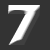
<style>
.page{position:relative;width:50px;height:50px;background:#333333}
.page>*{position:absolute;margin:0}
.t1{font:60px "ErasITC-Bold"}
</style>
<div class="page">
<p class="t1" style="left:8px;top:5px;width:32px;height:40px">7</p>
</div>
